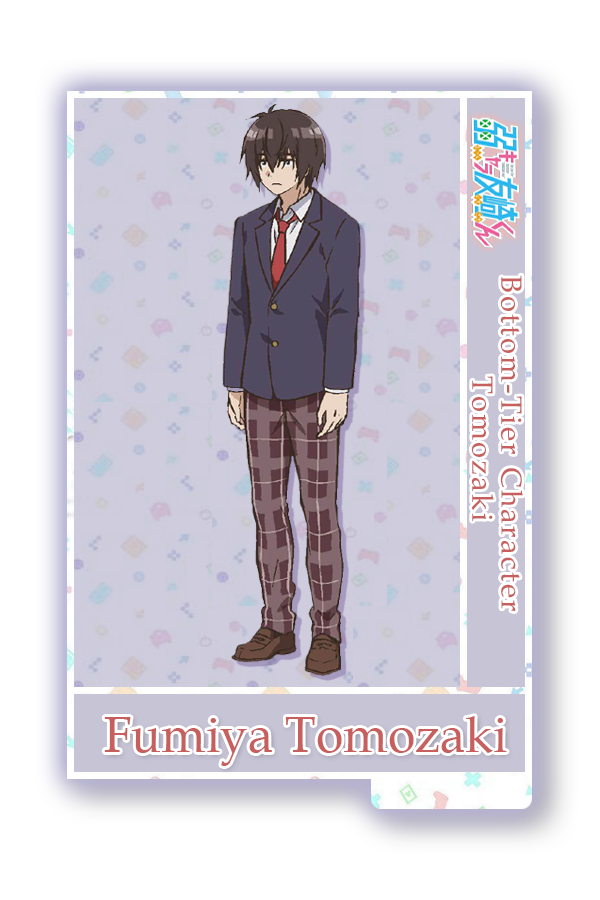
<style>
.page{position:relative;width:600px;height:900px;background:#ffffff}
.page>*{position:absolute;margin:0}
.t1{font:29.2px/29.2px "BookAntiqua";letter-spacing:0.08em;color:#c65f5d}
.t2{font:50px "BookAntiqua";color:#c65f5d}
</style>
<div class="page">
<p class="t1" style="left:471px;top:275px;width:52px;height:336px;text-align:center;rotate:90deg">Bottom-Tier Character <br>Tomozaki</p>
<p class="t2" style="left:104px;top:716px;width:403px;height:50px">Fumiya Tomozaki</p>
</div>
